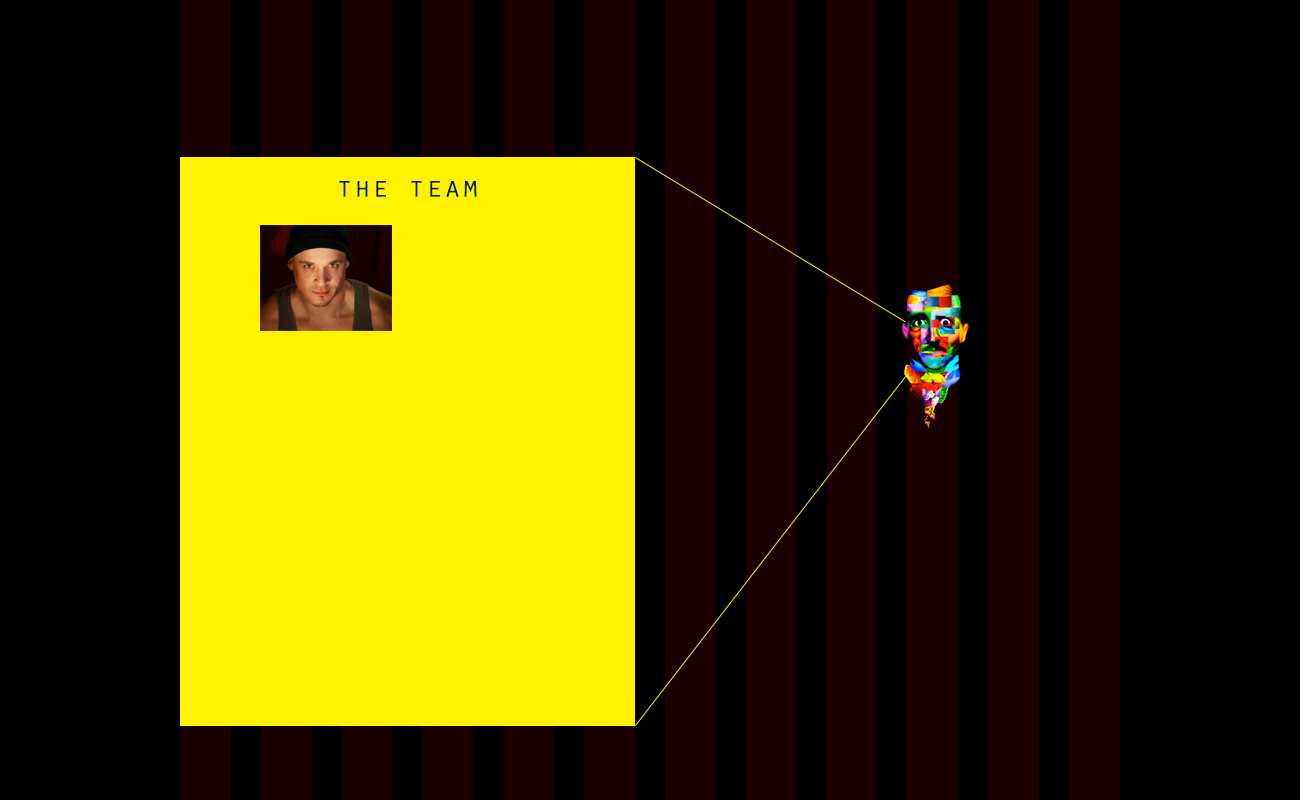
<style>
.page{position:relative;width:1300px;height:800px;background:#000000}
.page>*{position:absolute;margin:0}
.t1{font:30px "OratorStd";color:#002035}
</style>
<div class="page">
<p class="t1" style="left:339px;top:181px;width:138px;height:17px">the team</p>
</div>
